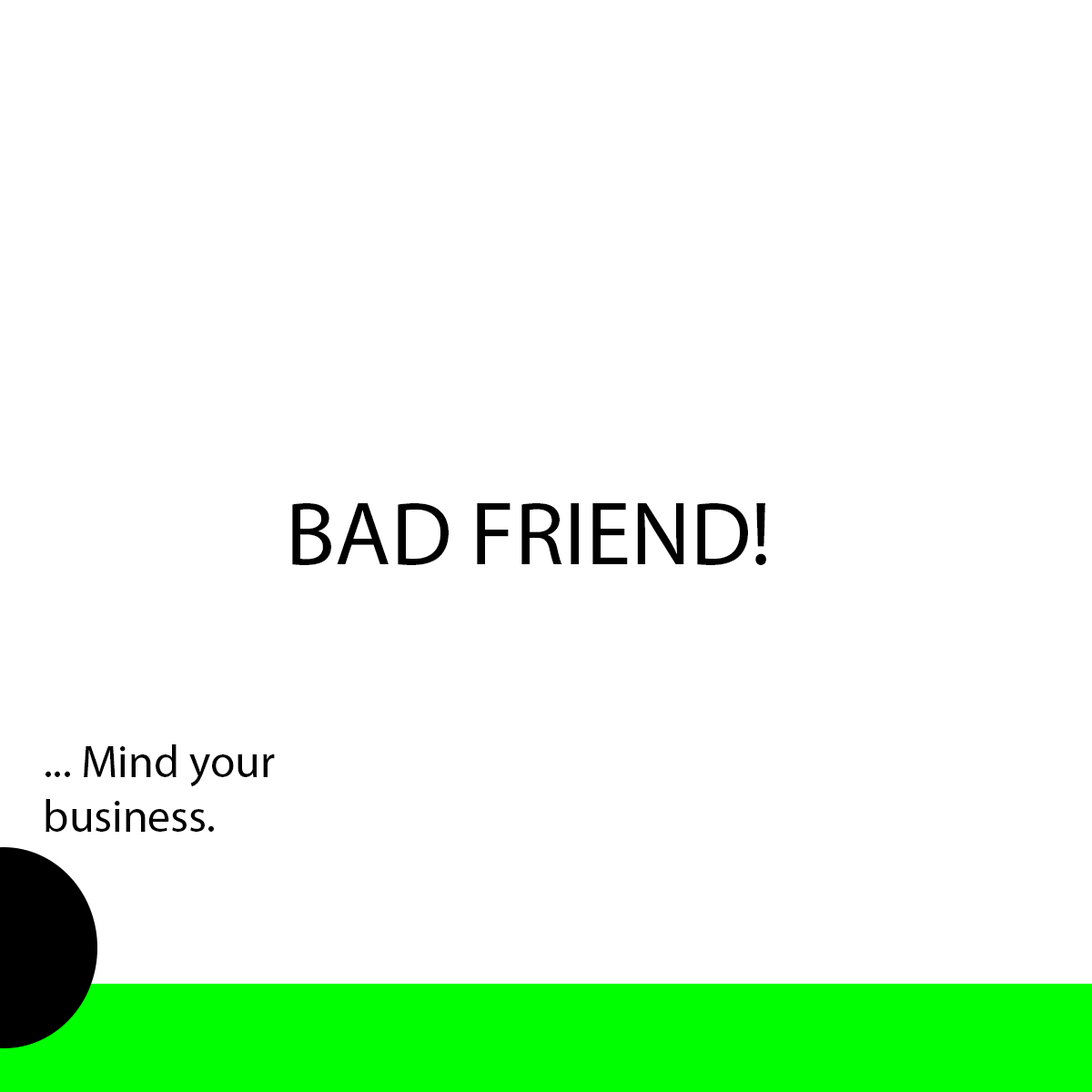
<style>
.page{position:relative;width:1092px;height:1092px;background:#ffffff}
.page>*{position:absolute;margin:0}
.t1{font:91px "MyriadPro-Regular";color:#000000}
.t2{font:45.5px "MyriadPro-Regular";color:#000000}
</style>
<div class="page">
<p class="t1" style="left:292px;top:503px;width:474px;height:62px">BAD FRIEND!</p>
<p class="t2" style="left:45px;top:744px;width:230px;height:88px">... Mind your<br>business.</p>
</div>
